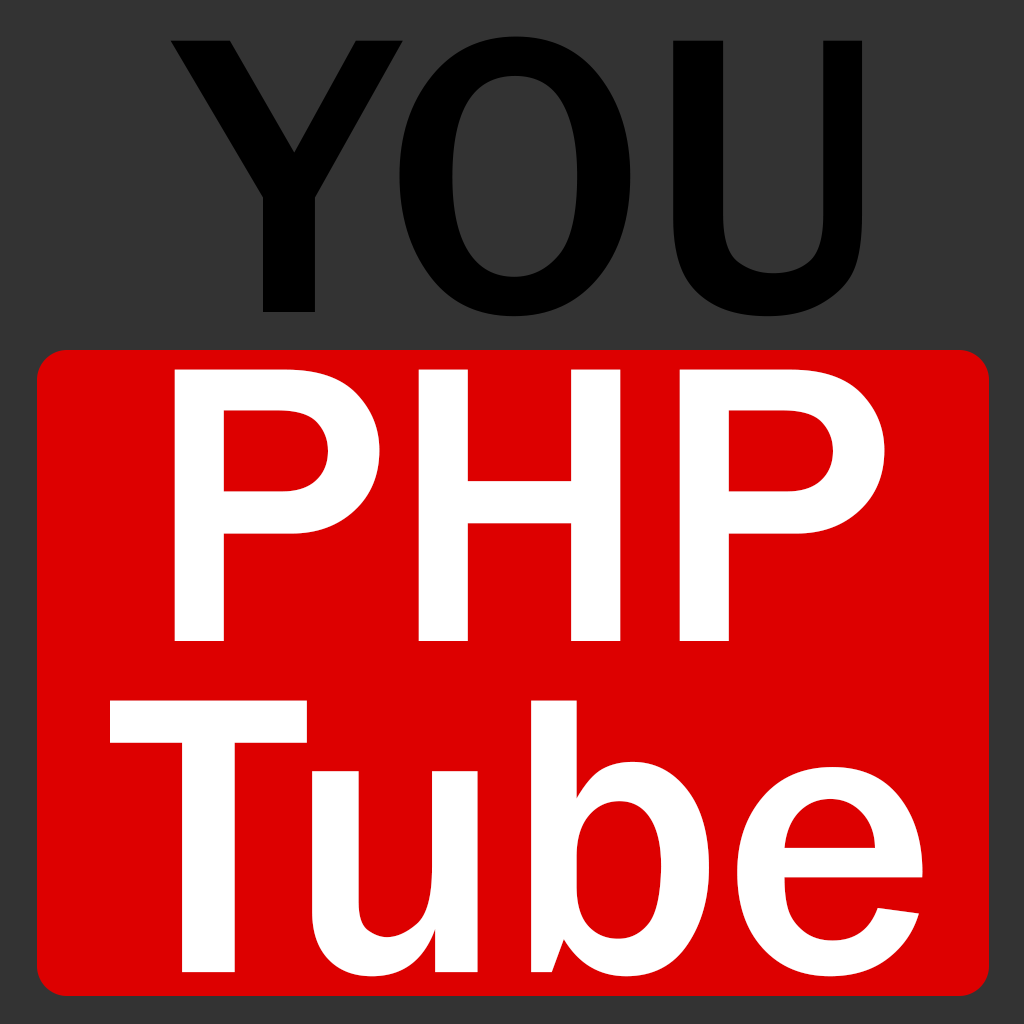
<style>
.page{position:relative;width:1024px;height:1024px;background:#dd0000}
.page>*{position:absolute;margin:0}
.t1{font:406.9px "FranklinGothic-Medium";color:#000000}
.t2{font:406.9px "FranklinGothic-Medium";color:#ffffff}
</style>
<div class="page">
<p class="t1" style="left:170px;top:36px;width:693px;height:281px">YOU</p>
<p class="t2" style="left:174px;top:369px;width:711px;height:272px">PHP</p>
<p class="t2" style="left:110px;top:700px;width:813px;height:277px">Tube</p>
</div>
